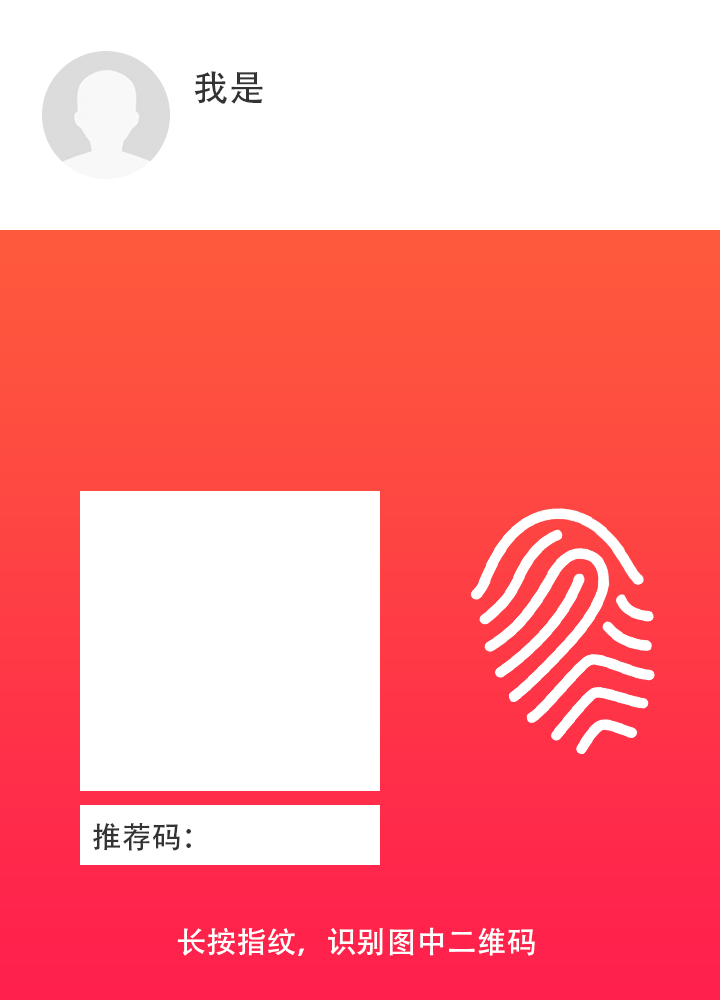
<style>
.page{position:relative;width:720px;height:1000px;background:#ffffff}
.page>*{position:absolute;margin:0}
.t1{font:36px "AdobeHeitiStd-Regular";color:#333333}
.t2{font:30px "AdobeHeitiStd-Regular";color:#333333}
.t3{font:30px "AdobeHeitiStd-Regular";color:#ffffff}
</style>
<div class="page">
<p class="t1" style="left:194px;top:71px;width:69px;height:33px">我是</p>
<p class="t2" style="left:93px;top:823px;width:98px;height:28px">推荐码：</p>
<p class="t3" style="left:177px;top:927px;width:358px;height:29px">长按指纹，识别图中二维码</p>
</div>
